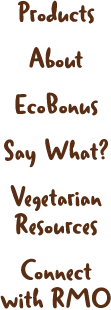
<style>
.page{position:relative;width:111px;height:310px;background:#ffffff}
.page>*{position:absolute;margin:0}
.t1{font:28px/28px "Duffy-Bold";color:#592e14}
</style>
<div class="page">
<p class="t1" style="left:0px;top:0px;width:111px;height:309px;text-align:center">Products<br>About<br>EcoBonus<br>Say What?<br>Vegetarian<br>Resources<br>Connect<br>with RMO</p>
</div>
